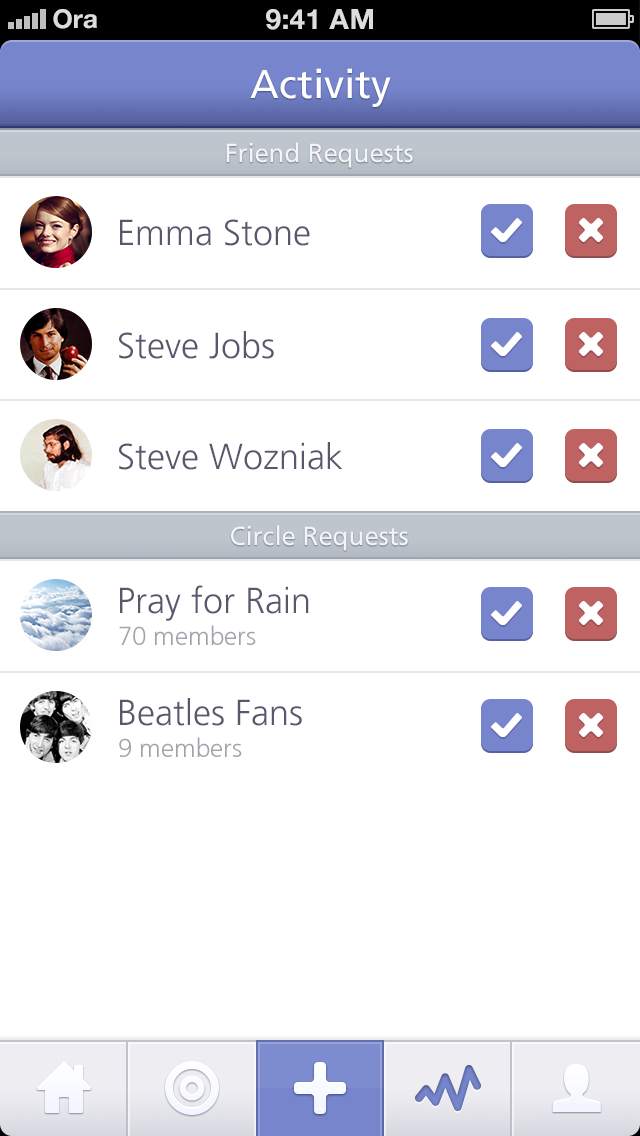
<style>
.page{position:relative;width:640px;height:1136px;background:#ffffff}
.page>*{position:absolute;margin:0}
.t1{font:40px "FrutigerLT-Roman";color:#ffffff}
.t2{font:26px "FrutigerLT-Roman";color:#ffffff}
.t3{font:36px "FrutigerLT-Light";color:#58586d}
.t4{font:26px "FrutigerCE-Light";color:#a3a3ac}
</style>
<div class="page">
<p class="t1" style="left:250px;top:68px;width:141px;height:39px">Activity</p>
<p class="t2" style="left:226px;top:142px;width:187px;height:26px">Friend Requests</p>
<p class="t3" style="left:120px;top:219px;width:190px;height:27px">Emma Stone</p>
<p class="t3" style="left:119px;top:331px;width:155px;height:28px">Steve Jobs</p>
<p class="t3" style="left:119px;top:442px;width:224px;height:28px">Steve Wozniak</p>
<p class="t2" style="left:231px;top:525px;width:177px;height:26px">Circle Requests</p>
<p class="t3" style="left:120px;top:585px;width:189px;height:36px">Pray for Rain</p>
<p class="t4" style="left:119px;top:625px;width:137px;height:20px">70 members</p>
<p class="t3" style="left:120px;top:698px;width:182px;height:28px">Beatles Fans</p>
<p class="t4" style="left:119px;top:737px;width:123px;height:20px">9 members</p>
</div>
